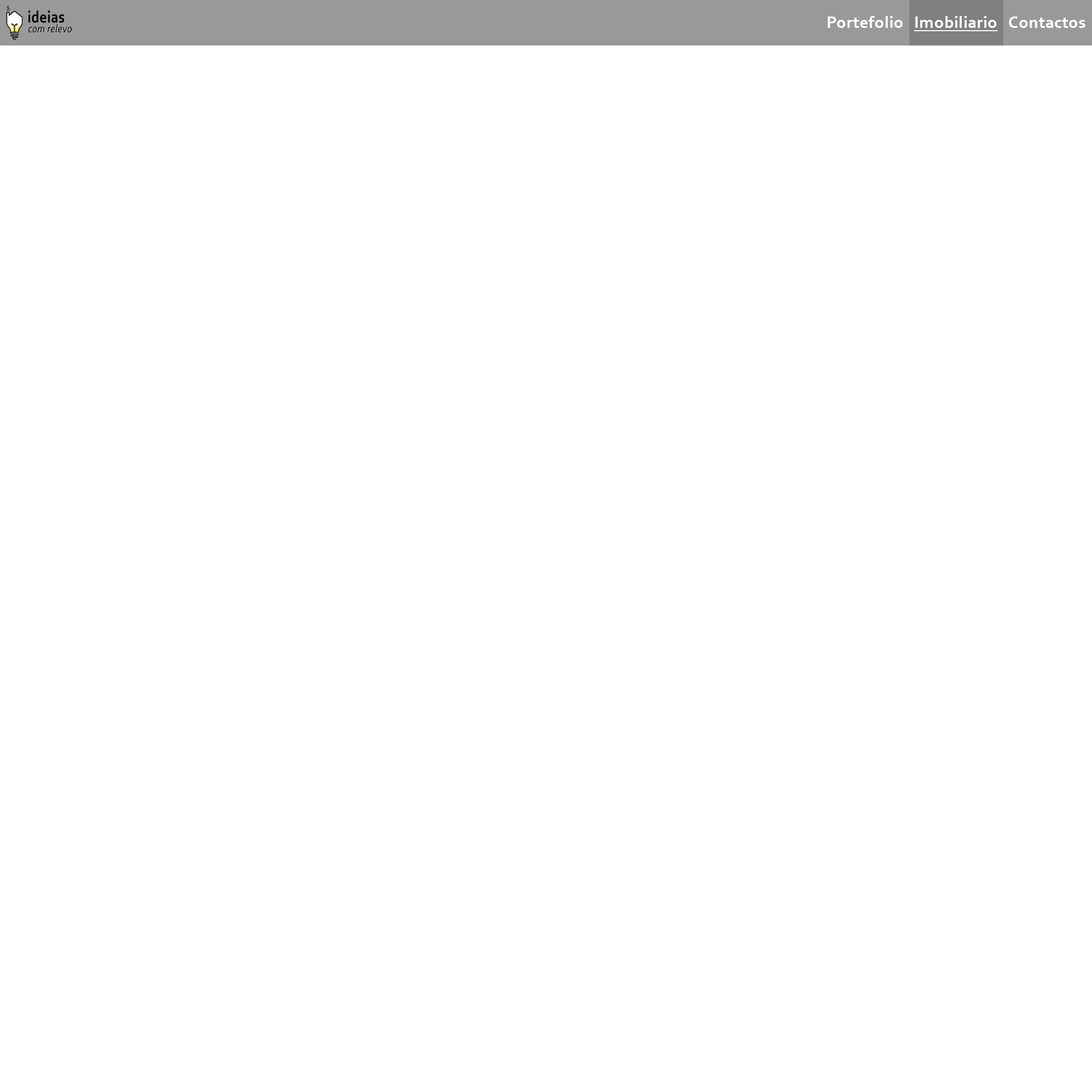
<style>
.page{position:relative;width:1092px;height:1092px;background:#ffffff}
.page>*{position:absolute;margin:0}
.t1{font:17.1px "Corbel-Bold";letter-spacing:0.02em;color:#ffffff}
.t2{font:17.1px "Corbel-Bold";letter-spacing:0.02em;color:#ffffff;text-decoration:underline}
</style>
<div class="page">
<p class="t1" style="left:828px;top:16px;width:75px;height:12px">Portefolio</p>
<p class="t2" style="left:914px;top:16px;width:84px;height:15px">Imobiliario</p>
<p class="t1" style="left:1009px;top:16px;width:76px;height:12px">Contactos</p>
</div>
